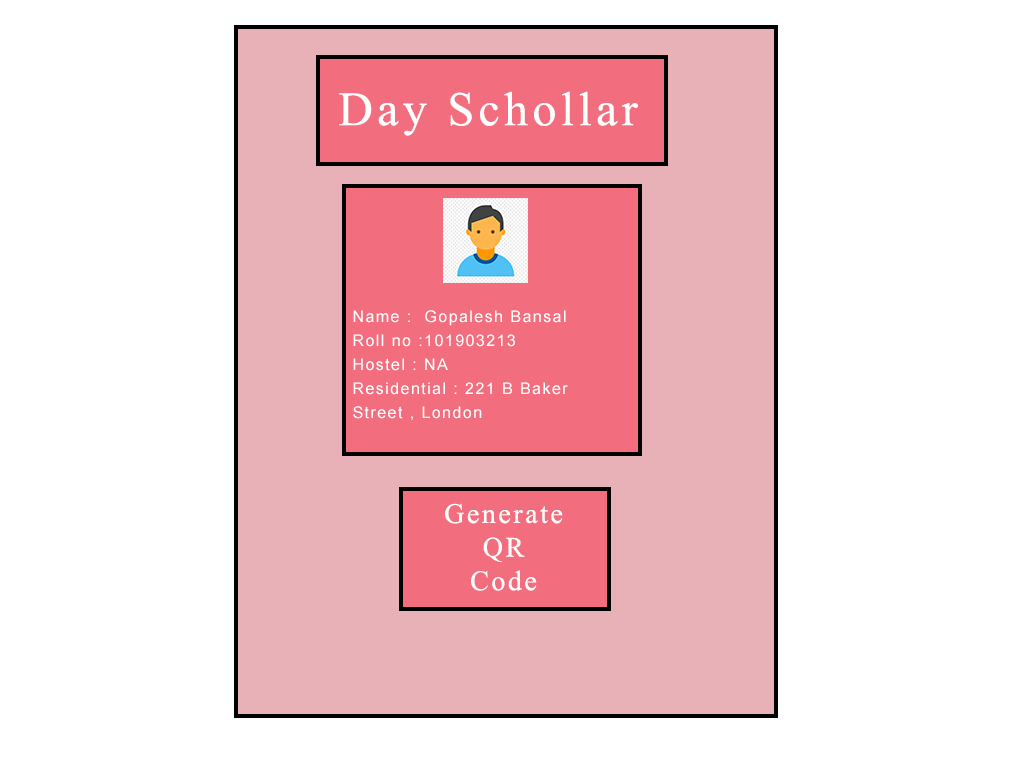
<style>
.page{position:relative;width:1024px;height:768px;background:#ffffff}
.page>*{position:absolute;margin:0}
.t1{font:48px "TimesNewRomanPSMT";letter-spacing:0.09em;color:#ffffff}
.t2{font:16px/24px "ArialMT";letter-spacing:0.09em;color:#ffffff}
.t3{font:28px "TimesNewRomanPSMT";letter-spacing:0.09em;color:#ffffff}
</style>
<div class="page">
<p class="t1" style="left:339px;top:91px;width:300px;height:45px">Day Schollar</p>
<p class="t2" style="left:353px;top:310px;width:215px;height:111px">Name :  Gopalesh Bansal<br>Roll no :101903213<br>Hostel : NA<br>Residential : 221 B Baker Street , London</p>
<p class="t3" style="left:445px;top:503px;width:118px;height:88px;text-align:center">Generate <br>QR <br>Code</p>
</div>
